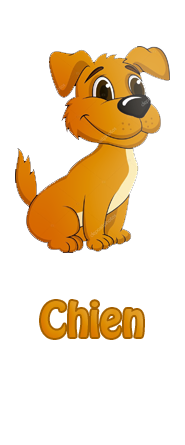
<style>
.page{position:relative;width:185px;height:445px;background:#ffffff}
.page>*{position:absolute;margin:0}
.t1{font:41.8px "HoboStd";color:#dd8d02}
</style>
<div class="page">
<p class="t1" style="left:41px;top:301px;width:102px;height:37px">Chien</p>
</div>
